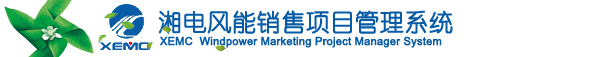
<style>
.page{position:relative;width:600px;height:57px;background:#ffffff}
.page>*{position:absolute;margin:0}
.t1{font:24px "YouYuan";color:#075ca5;font-weight:bold}
.t2{font:11px "ArialMT";color:#075ca5;font-weight:bold}
</style>
<div class="page">
<p class="t1" style="left:158px;top:10px;width:295px;height:24px">湘电风能销售项目管理系统</p>
<p class="t2" style="left:159px;top:36px;width:283px;height:12px">XEMC  Windpower Marketing Project Manager System</p>
</div>
